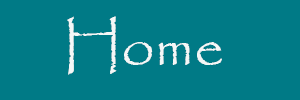
<style>
.page{position:relative;width:300px;height:100px;background:#007a86}
.page>*{position:absolute;margin:0}
.t1{font:60px "Papyrus-Regular";color:#f4f7f7}
</style>
<div class="page">
<p class="t1" style="left:67px;top:16px;width:155px;height:59px">Home</p>
</div>
